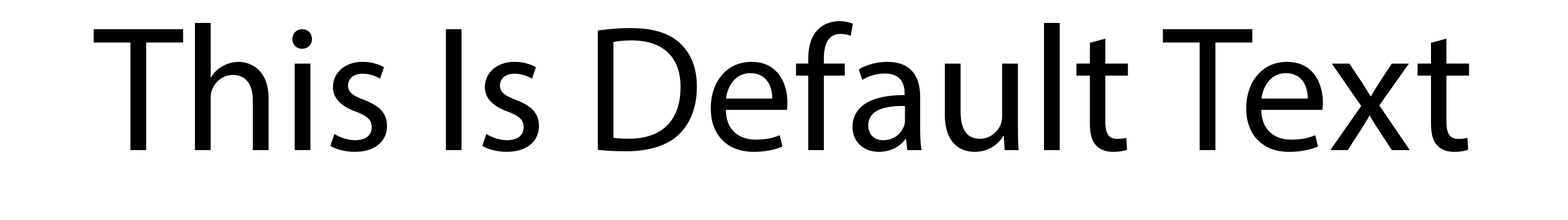
<style>
.page{position:relative;width:1568px;height:220px;background:#ffffff}
.page>*{position:absolute;margin:0}
.t1{font:179.2px "MyriadPro-Regular";color:#000000}
</style>
<div class="page">
<p class="t1" style="left:93px;top:21px;width:1376px;height:131px">This Is Default Text</p>
</div>
